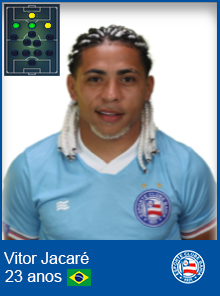
<style>
.page{position:relative;width:220px;height:296px}
.page>*{position:absolute;margin:0}
.t1{font:16px "ArialMT";color:#ffffff}
</style>
<div class="page">
<p class="t1" style="left:4px;top:252px;width:85px;height:12px">Vitor Jacaré</p>
<p class="t1" style="left:5px;top:270px;width:57px;height:12px">23 anos</p>
</div>
